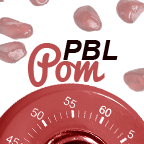
<style>
.page{position:relative;width:144px;height:144px;background:#ffffff}
.page>*{position:absolute;margin:0}
.t1{font:28px "Arial-BoldItalicMT";color:#1a0000}
.t2{font:43.6px "Pacifico";color:#bb4e4e}
</style>
<div class="page">
<p class="t1" style="left:63px;top:40px;width:55px;height:20px">PBL</p>
<p class="t2" style="left:27px;top:43px;width:78px;height:44px">Pom</p>
</div>
